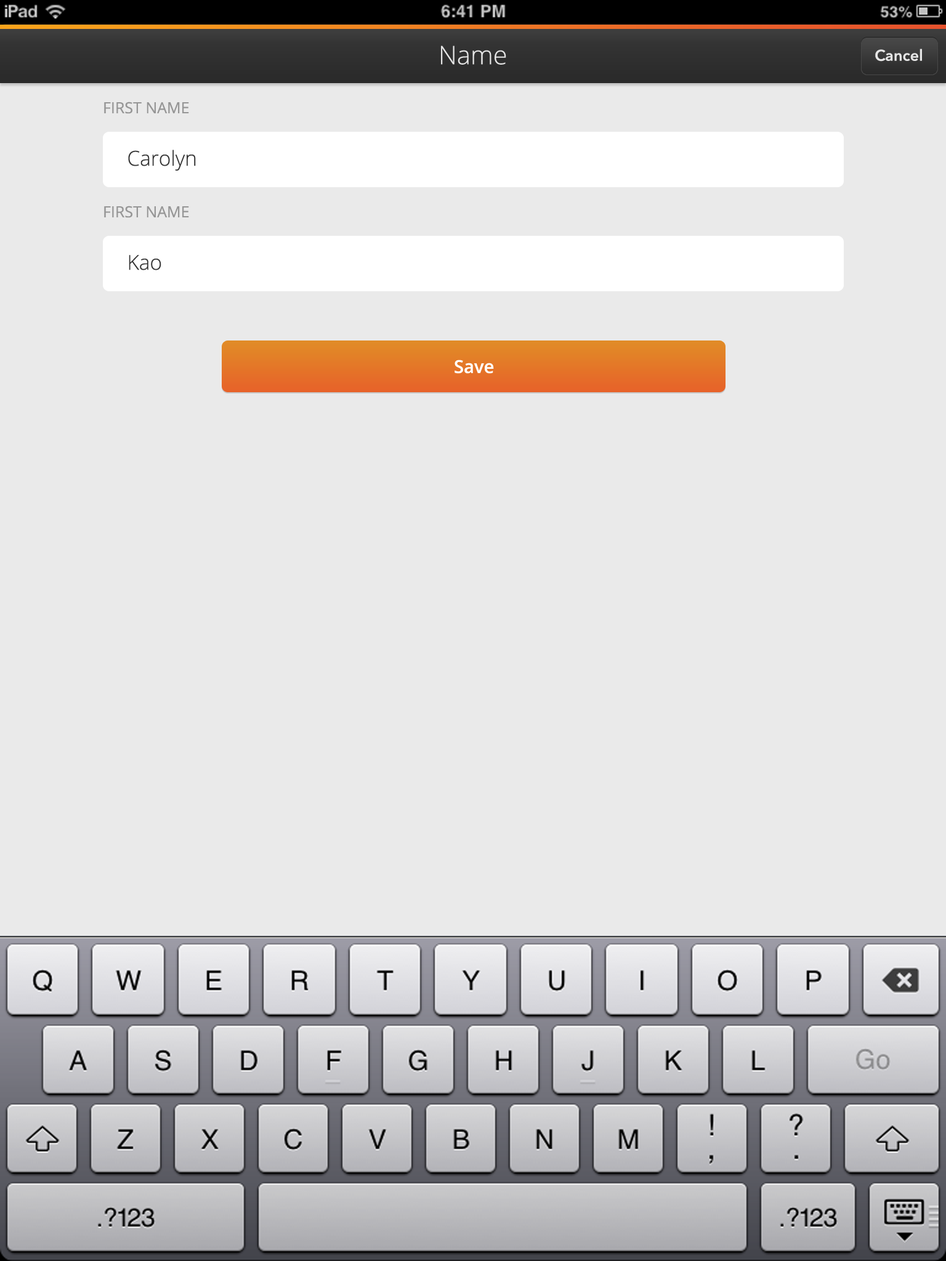
<style>
.page{position:relative;width:946px;height:1261px;background:#eaeaea}
.page>*{position:absolute;margin:0}
.t1{font:25.7px "OpenSans-Light";color:#e5e5e5}
.t2{font:15.4px "AvenirNext-DemiBold";color:#e5e5e5}
.t3{font:15.4px "OpenSans";color:#969696}
.t4{font:20.5px "OpenSans-Light";color:#343434}
.t5{font:18px "OpenSans-Semibold";color:#ffffff}
</style>
<div class="page">
<p class="t1" style="left:441px;top:46px;width:65px;height:19px">Name</p>
<p class="t2" style="left:875px;top:49px;width:47px;height:13px">Cancel</p>
<p class="t3" style="left:104px;top:102px;width:85px;height:12px">FIRST NAME</p>
<p class="t4" style="left:128px;top:150px;width:68px;height:21px">Carolyn</p>
<p class="t3" style="left:104px;top:206px;width:85px;height:12px">FIRST NAME</p>
<p class="t4" style="left:129px;top:255px;width:32px;height:15px">Kao</p>
<p class="t5" style="left:454px;top:360px;width:40px;height:14px">Save</p>
</div>
